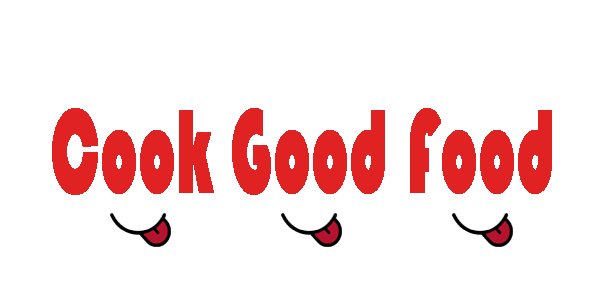
<style>
.page{position:relative;width:600px;height:300px;background:#ffffff}
.page>*{position:absolute;margin:0}
.t1{font:122.1px "Bauhaus93";letter-spacing:0.01em;color:#e12222;font-weight:bold;scale:0.52 1}
</style>
<div class="page">
<p class="t1" style="left:52px;top:108px;width:500px;height:87px">Cook Good Food</p>
</div>
